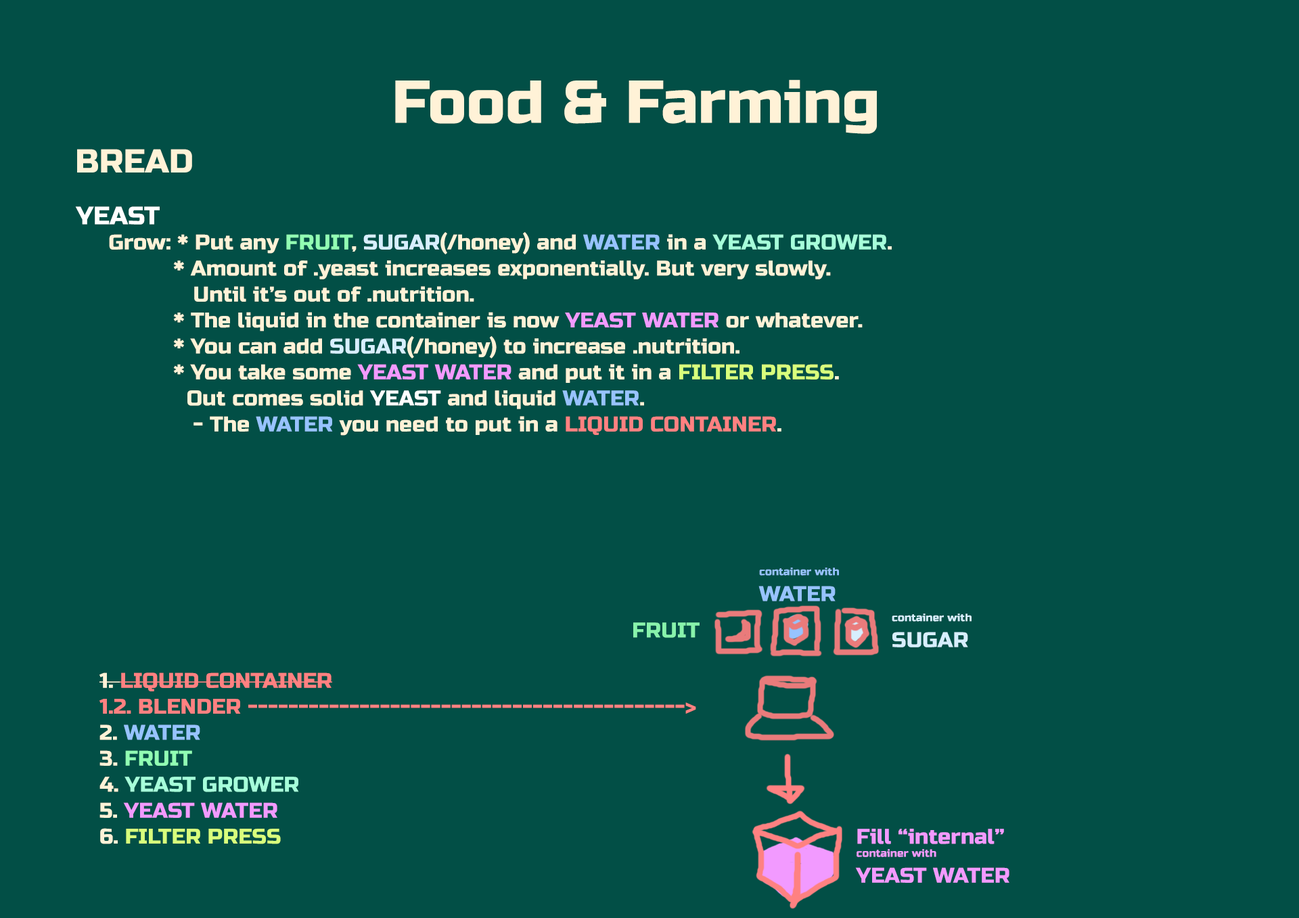
<style>
.page{position:relative;width:1299px;height:918px;background:#024f46}
.page>*{position:absolute;margin:0}
.t1{font:60.3px "RussoOne-Regular";color:#fff2d7}
.t2{font:33.1px "RussoOne-Regular";color:#fff2d7}
.t3{font:25.2px "RussoOne-Regular";color:#ffffff}
.t4{font:21.2px "RussoOne-Regular";color:#fff2d7}
.t5{font:21.2px "RussoOne-Regular";color:#91ffb3}
.t6{font:21.2px "RussoOne-Regular";color:#d7efff}
.t7{font:21.2px "RussoOne-Regular";color:#97c3ff}
.t8{font:21.2px "RussoOne-Regular";color:#a6ffda}
.t9{font:21.2px "RussoOne-Regular";color:#f29aff}
.t10{font:21.2px "RussoOne-Regular";color:#d8ff7c}
.t11{font:21.2px "RussoOne-Regular";color:#ffffff}
.t12{font:21.2px "RussoOne-Regular";color:#ff8181}
.t13{font:10.6px "RussoOne-Regular";color:#97c3ff}
.t14{font:10.6px "RussoOne-Regular";color:#d7efff}
.t15{font:21.2px "RussoOne-Regular";color:#88f3ab}
.t16{font:10.6px "RussoOne-Regular";color:#f29aff}
</style>
<div class="page">
<p class="t1" style="left:395px;top:80px;width:482px;height:54px">Food &amp; Farming</p>
<p class="t2" style="left:77px;top:149px;width:115px;height:24px">BREAD</p>
<p class="t3" style="left:75px;top:206px;width:85px;height:19px">YEAST</p>
<p class="t4" style="left:109px;top:232px;width:783px;height:204px">Grow: * Put any <span class="t5">FRUIT</span>, <span class="t6">SUGAR</span>(/honey) and <span class="t7">WATER </span>in a <span class="t8">YEAST GROWER</span>.<br>          * Amount of .yeast increases exponentially. But very slowly.<br>             Until it’s out of .nutrition.<br>          * The liquid in the container is now <span class="t9">YEAST WATER</span> or whatever.<br>          * You can add <span class="t6">SUGAR</span>(/honey) to increase .nutrition.<br>          * You take some <span class="t9">YEAST WATER</span> and put it in a <span class="t10">FILTER PRESS</span>.<br>            Out comes solid <span class="t11">YEAST </span>and liquid <span class="t7">WATER</span>.<br>             - The <span class="t7">WATER </span>you need to put in a <span class="t12">LIQUID CONTAINER</span>.</p>
<p class="t13" style="left:758px;top:568px;width:81px;height:33px">container with<br><span class="t7">WATER</span></p>
<p class="t14" style="left:892px;top:614px;width:79px;height:33px">container with<br><span class="t6">SUGAR</span></p>
<p class="t15" style="left:633px;top:622px;width:67px;height:16px">FRUIT</p>
<p class="t12" style="left:99px;top:672px;width:597px;height:172px"><span class="t4">1. </span>LIQUID CONTAINER<br>1.2. BLENDER -------------------------------------------&gt;<br><span class="t4">2. </span><span class="t7">WATER <br></span><span class="t4">3. </span><span class="t5">FRUIT<br></span><span class="t4">4. </span><span class="t8">YEAST GROWER<br></span><span class="t4">5. </span><span class="t9">YEAST WATER<br></span><span class="t4">6. </span><span class="t10">FILTER PRESS</span></p>
<p class="t9" style="left:855px;top:829px;width:154px;height:54px">Fill “internal”<br><span class="t16">container with<br></span>YEAST WATER</p>
</div>
